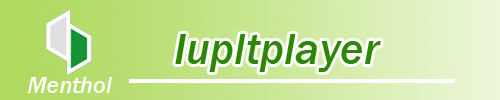
<style>
.page{position:relative;width:500px;height:100px}
.page>*{position:absolute;margin:0}
.t1{font:45.3px "FranklinGothic-MediumItalic";color:#2e8702}
.t2{font:24.3px "FranklinGothic-MediumItalic";color:#ffffff}
</style>
<div class="page">
<p class="t1" style="left:175px;top:34px;width:206px;height:38px">Iupltplayer</p>
<p class="t2" style="left:28px;top:77px;width:84px;height:16px">Menthol</p>
</div>
